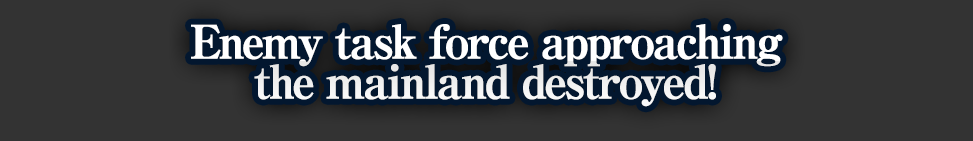
<style>
.page{position:relative;width:973px;height:141px;background:#333333}
.page>*{position:absolute;margin:0}
.t1{font:46px/40px "RyuminPro-ExBold";letter-spacing:-0.08em;color:#ffffff;font-weight:bold}
</style>
<div class="page">
<p class="t1" style="left:191px;top:24px;width:592px;height:83px;text-align:center">Enemy task force approaching<br>the mainland destroyed!</p>
</div>
